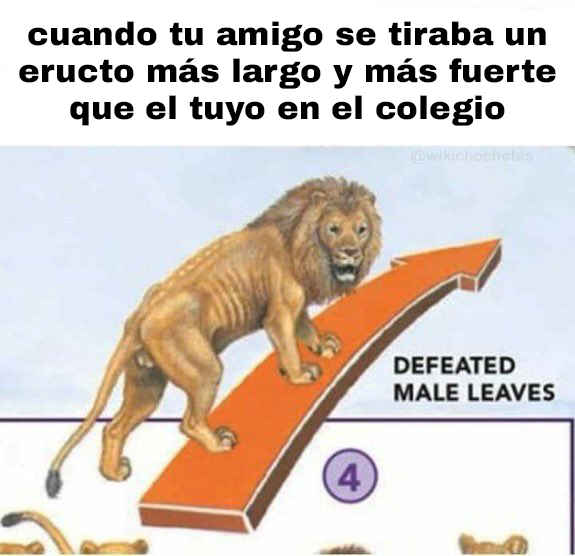
<style>
.page{position:relative;width:575px;height:556px;background:#ffffff}
.page>*{position:absolute;margin:0}
.t1{font:32.6px "ArchivoBlack-Regular";color:#000000}
.t2{font:15.5px "ArialRoundedMTBold";color:#cdd9e5}
</style>
<div class="page">
<p class="t1" style="left:19px;top:21px;width:537px;height:105px;text-align:center">cuando tu amigo se tiraba un<br>eructo más largo y más fuerte<br>que el tuyo en el colegio</p>
<p class="t2" style="left:411px;top:149px;width:122px;height:16px">@wikichochetes</p>
</div>
